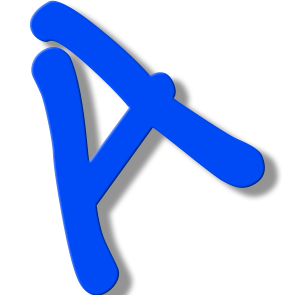
<style>
.page{position:relative;width:285px;height:295px;background:#ffffff}
.page>*{position:absolute;margin:0}
.t1{font:420.5px "Andy-Bold";color:#004af5;font-variant:small-caps;scale:0.93 1}
</style>
<div class="page">
<p class="t1" style="left:29px;top:0px;width:236px;height:296px;rotate:-28deg">A</p>
</div>
